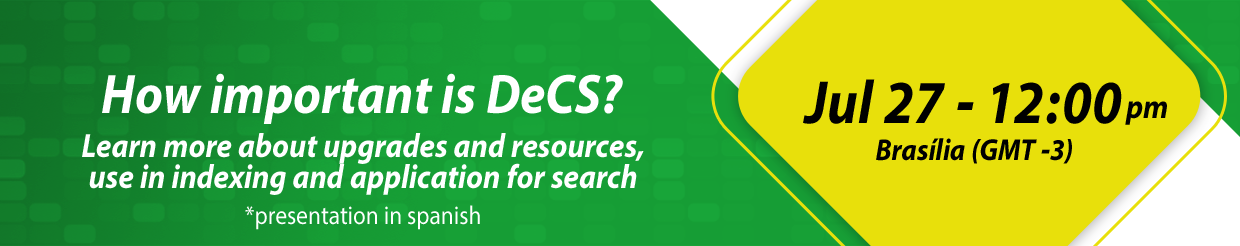
<style>
.page{position:relative;width:1240px;height:246px;background:#e8e00b}
.page>*{position:absolute;margin:0}
.t1{font:55.9px "MyriadHebrew-BoldIt";color:#ffffff;scale:0.9 1}
.t2{font:30.5px "MyriadHebrew-BoldIt";color:#000000;scale:0.9 1}
.t3{font:61.2px "MyriadHebrew-BoldIt";color:#000000;scale:0.9 1}
.t4{font:33.7px "MyriadHebrew-BoldIt";color:#000000;scale:0.9 1}
.t5{font:33.9px/31px "MyriadHebrew-BoldIt";color:#ffffff;scale:0.9 1}
.t6{font:25.9px "MyriadHebrew-Regular";color:#ffffff;scale:0.9 1}
</style>
<div class="page">
<p class="t1" style="left:102px;top:73px;width:521px;height:51px">How important is DeCS?</p>
<p class="t2" style="left:803px;top:79px;width:319px;height:85px;text-align:center"><span class="t3">Jul 27 - 12:00<br></span>    Brasília (GMT -3)</p>
<p class="t4" style="left:1125px;top:101px;width:42px;height:24px">pm</p>
<p class="t5" style="left:82px;top:133px;width:562px;height:62px;text-align:center">Learn more about upgrades and resources,<br>use in indexing and application for search</p>
<p class="t6" style="left:245px;top:205px;width:235px;height:25px">*presentation in spanish</p>
</div>
